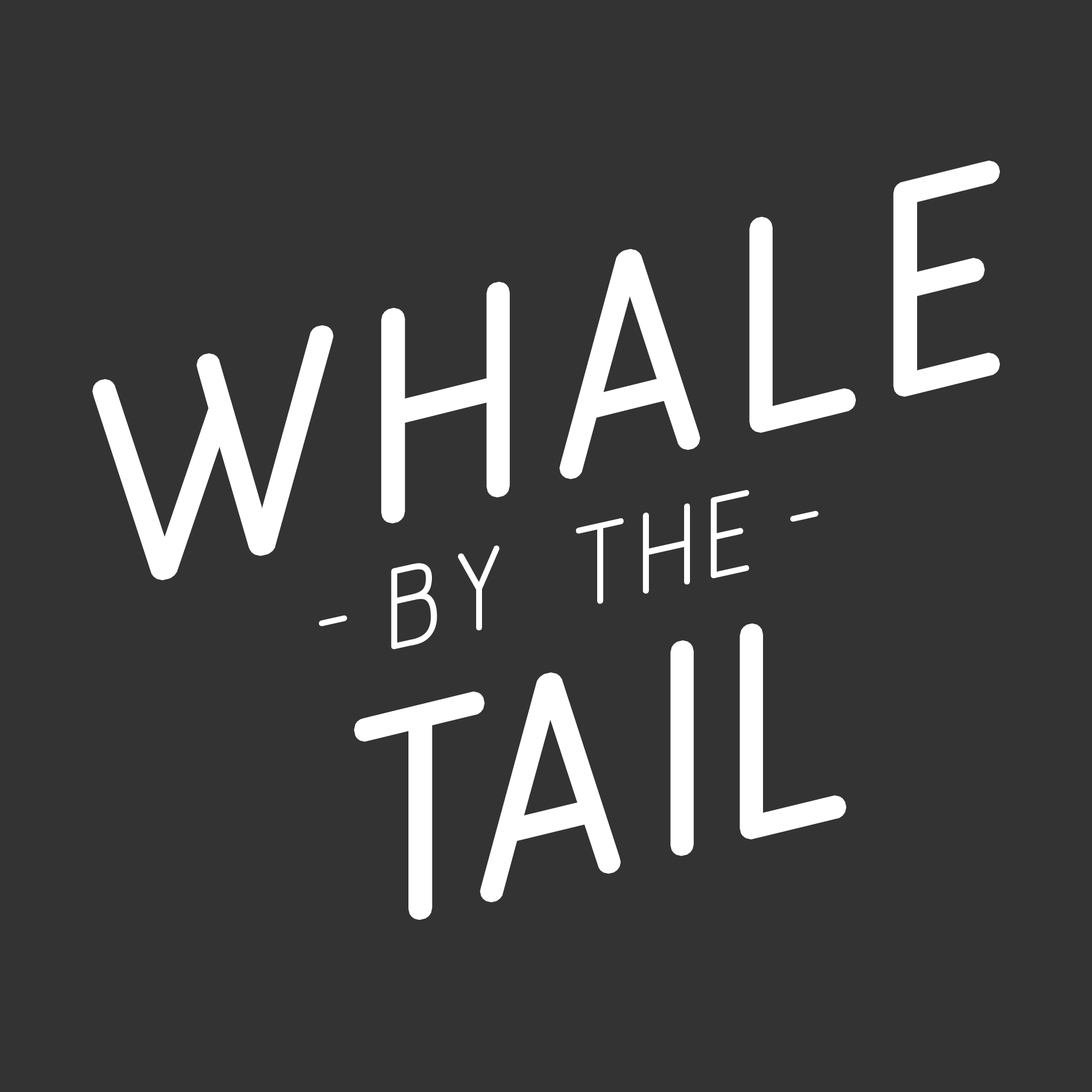
<style>
.page{position:relative;width:1092px;height:1092px;background:#333333}
.page>*{position:absolute;margin:0}
.t1{font:447.6px "Burford-Line";letter-spacing:-0.14em;color:#ffffff;scale:1.03 1}
.t2{font:175.2px "Burford-Line";letter-spacing:-0.14em;color:#ffffff}
.t3{font:447.6px "Burford-Line";letter-spacing:-0.14em;color:#ffffff}
</style>
<div class="page">
<p class="t1" style="left:102px;top:170px;width:889px;height:401px;rotate:-14deg">WHALE</p>
<p class="t2" style="left:321px;top:492px;width:495px;height:155px;rotate:-13deg">- BY  THE -</p>
<p class="t3" style="left:364px;top:633px;width:473px;height:278px;rotate:-14deg">TAIL</p>
</div>
